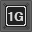
<style>
.page{position:relative;width:32px;height:32px;background:#212121}
.page>*{position:absolute;margin:0}
.t1{font:12px "Helvetica-Bold";color:#dadada}
</style>
<div class="page">
<p class="t1" style="left:8px;top:12px;width:15px;height:9px">1G</p>
</div>
